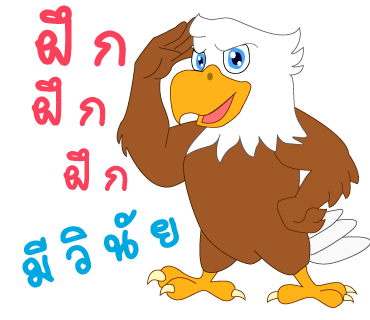
<style>
.page{position:relative;width:370px;height:320px;background:#ffffff}
.page>*{position:absolute;margin:0}
.t1{font:101px "2005_iannnnnMTV";letter-spacing:0.075em;color:#fa405a;scale:1.06 1}
.t2{font:82px "2005_iannnnnMTV";letter-spacing:0.075em;color:#fa405a;scale:1.06 1}
.t3{font:71px "2005_iannnnnMTV";letter-spacing:0.075em;color:#fa405a;scale:1.06 1}
.t4{font:82px "2005_iannnnnMTV";letter-spacing:0.075em;color:#00a8e1;scale:1.06 1}
</style>
<div class="page">
<p class="t1" style="left:35px;top:5px;width:91px;height:62px">ฝึก</p>
<p class="t2" style="left:31px;top:76px;width:75px;height:51px">ฝึก</p>
<p class="t3" style="left:63px;top:148px;width:65px;height:43px">ฝึก</p>
<p class="t4" style="left:22px;top:209px;width:157px;height:79px;rotate:-16deg">มีวินัย</p>
</div>
